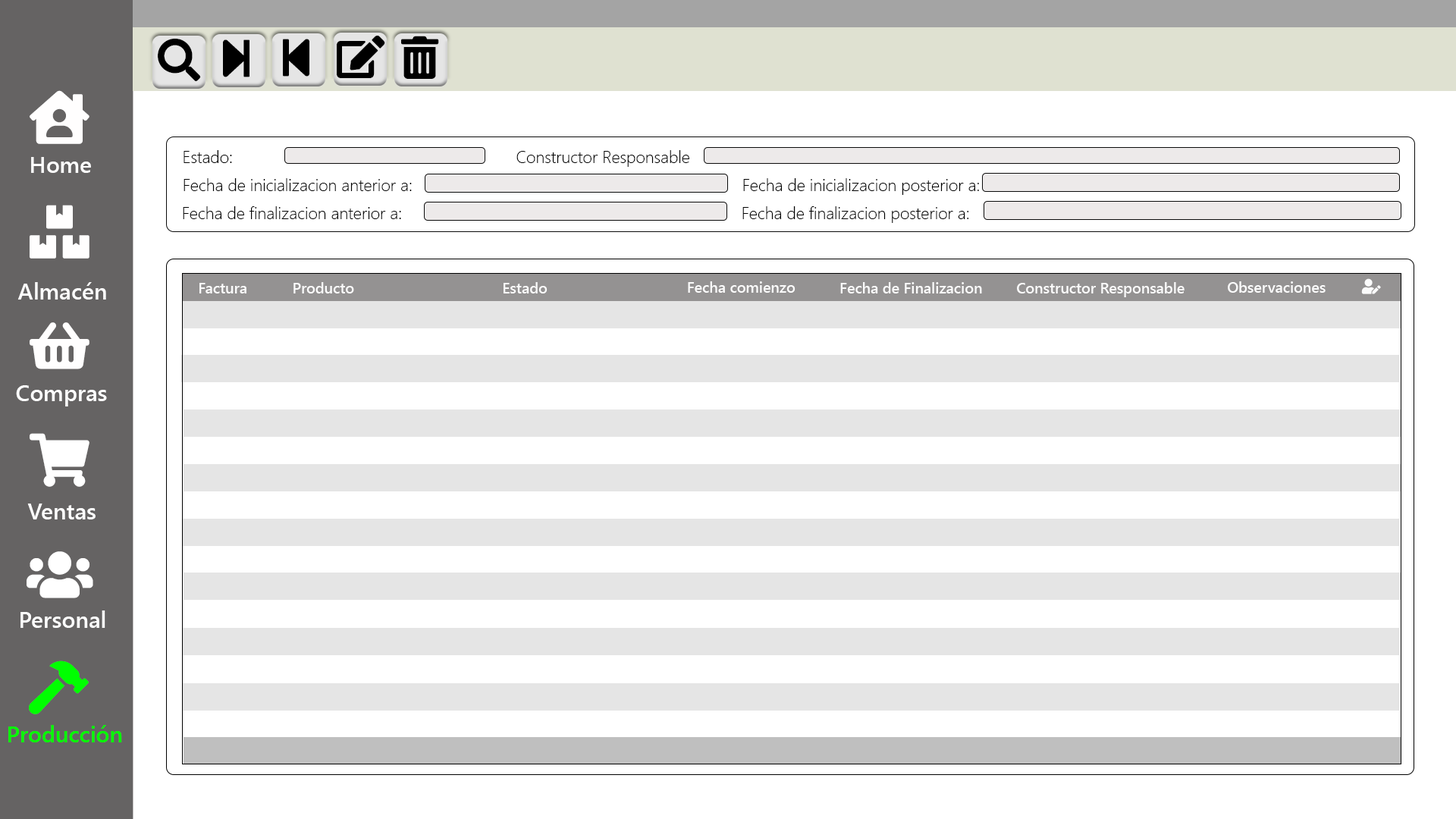
<style>
.page{position:relative;width:1456px;height:819px;background:#ffffff}
.page>*{position:absolute;margin:0}
.t1{font:22.7px "SegoeUI-Semibold";color:#ffffff}
.t2{font:16.7px "SegoeUI-Light";color:#000000}
.t3{font:14.9px "SegoeUI-Semibold";color:#fbfbfb}
.t4{font:22.7px "SegoeUI-Semibold";color:#00ff00}
</style>
<div class="page">
<p class="t1" style="left:31px;top:157px;width:60px;height:16px">Home</p>
<p class="t2" style="left:184px;top:150px;width:48px;height:13px">Estado:</p>
<p class="t2" style="left:516px;top:150px;width:173px;height:17px">Constructor Responsable</p>
<p class="t2" style="left:184px;top:178px;width:228px;height:13px">Fecha de inicializacion anterior a:</p>
<p class="t2" style="left:743px;top:178px;width:236px;height:17px">Fecha de inicializacion posterior a:</p>
<p class="t2" style="left:183px;top:206px;width:218px;height:13px">Fecha de finalizacion anterior a:</p>
<p class="t2" style="left:742px;top:206px;width:227px;height:17px">Fecha de finalizacion posterior a:</p>
<p class="t3" style="left:688px;top:281px;width:107px;height:12px">Fecha comienzo</p>
<p class="t3" style="left:1228px;top:281px;width:98px;height:12px">Observaciones</p>
<p class="t1" style="left:17px;top:282px;width:89px;height:18px">Almacén</p>
<p class="t3" style="left:199px;top:283px;width:47px;height:10px">Factura</p>
<p class="t3" style="left:293px;top:282px;width:61px;height:11px">Producto</p>
<p class="t3" style="left:504px;top:282px;width:44px;height:11px">Estado</p>
<p class="t3" style="left:840px;top:282px;width:142px;height:11px">Fecha de Finalizacion</p>
<p class="t3" style="left:1017px;top:282px;width:168px;height:15px">Constructor Responsable</p>
<p class="t1" style="left:16px;top:385px;width:91px;height:21px">Compras</p>
<p class="t1" style="left:27px;top:504px;width:69px;height:15px">Ventas</p>
<p class="t1" style="left:20px;top:610px;width:85px;height:18px">Personal</p>
<p class="t4" style="left:8px;top:725px;width:114px;height:17px">Producción</p>
</div>
